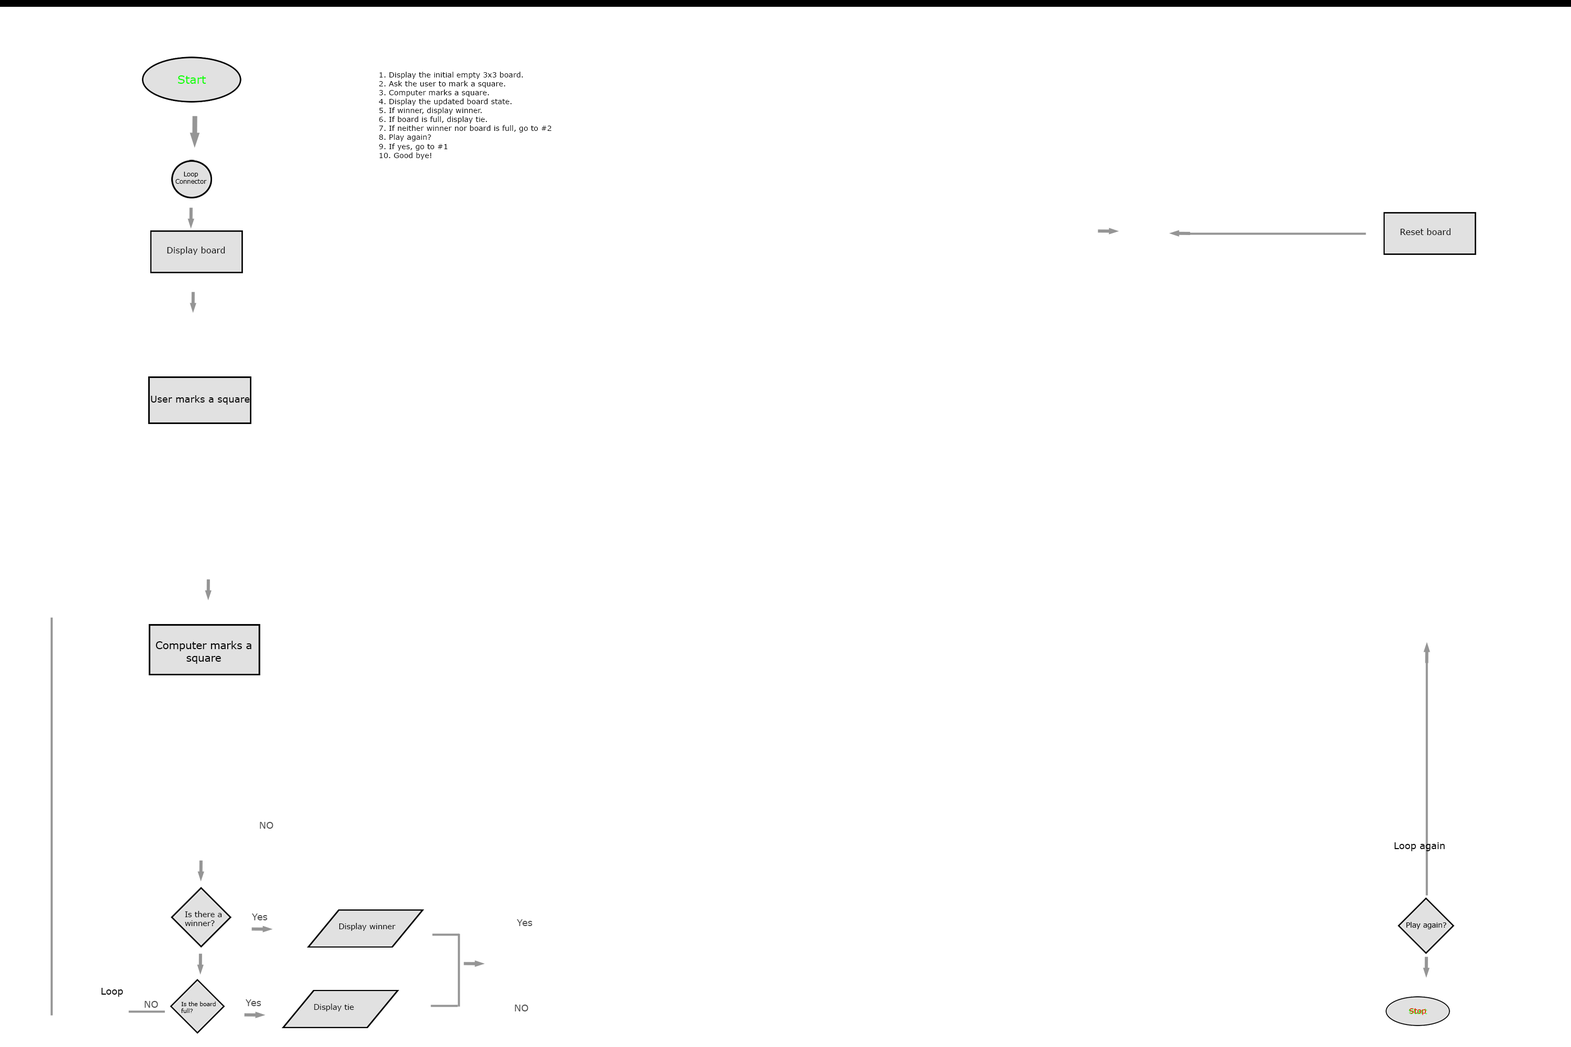
<style>
.page{position:relative;width:1571px;height:1047px;background:#ffffff}
.page>*{position:absolute;margin:0}
.t1{font:11.5px "Verdana";color:#0cff00}
.t2{font:7.5px "Verdana";color:#000000}
.t3{font:6.1px "Verdana";color:#000000}
.t4{font:8.6px "Verdana";color:#000000}
.t5{font:9.5px "Verdana";color:#000000}
.t6{font:10.3px "Verdana";color:#000000}
.t7{font:9.4px "Verdana";color:#4d4d4d}
.t8{font:9.4px "Verdana";color:#000000}
.t9{font:7.7px "Verdana";color:#000000}
.t10{font:7.1px "Verdana";color:#000000}
.t11{font:5.7px "Verdana";color:#000000}
.t12{font:7.4px "Verdana"}
.t13{font:7.4px "Verdana";color:#ff0000}
</style>
<div class="page">
<p class="t1" style="left:178px;top:75px;width:28px;height:9px">Start</p>
<p class="t2" style="left:379px;top:72px;width:172px;height:88px">1. Display the initial empty 3x3 board.<br>2. Ask the user to mark a square.<br>3. Computer marks a square.<br>4. Display the updated board state.<br>5. If winner, display winner.<br>6. If board is full, display tie.<br>7. If neither winner nor board is full, go to #2<br>8. Play again?<br>9. If yes, go to #1<br>10. Good bye!</p>
<p class="t3" style="left:175px;top:172px;width:32px;height:12px;text-align:center">Loop<br>Connector</p>
<p class="t4" style="left:1400px;top:228px;width:51px;height:7px">Reset board</p>
<p class="t4" style="left:167px;top:247px;width:58px;height:8px">Display board</p>
<p class="t5" style="left:151px;top:395px;width:99px;height:10px">User marks a square</p>
<p class="t6" style="left:156px;top:641px;width:95px;height:23px;text-align:center">Computer marks a<br>square</p>
<p class="t7" style="left:260px;top:822px;width:13px;height:7px">NO</p>
<p class="t8" style="left:1395px;top:843px;width:50px;height:9px">Loop again</p>
<p class="t9" style="left:185px;top:911px;width:37px;height:15px">Is there a<br>winner?</p>
<p class="t7" style="left:252px;top:914px;width:16px;height:7px">Yes</p>
<p class="t9" style="left:339px;top:923px;width:57px;height:8px">Display winner</p>
<p class="t7" style="left:517px;top:920px;width:16px;height:6px">Yes</p>
<p class="t10" style="left:1406px;top:922px;width:41px;height:8px">Play again?</p>
<p class="t8" style="left:101px;top:988px;width:22px;height:9px">Loop</p>
<p class="t7" style="left:145px;top:1001px;width:13px;height:7px">NO</p>
<p class="t11" style="left:181px;top:1002px;width:35px;height:11px">Is the board<br>full?</p>
<p class="t7" style="left:246px;top:1000px;width:15px;height:7px">Yes</p>
<p class="t9" style="left:314px;top:1004px;width:40px;height:8px">Display tie</p>
<p class="t7" style="left:515px;top:1005px;width:13px;height:7px">NO</p>
<p class="t12" style="left:1409px;top:1009px;width:19px;height:5px">Start</p>
<p class="t13" style="left:1409px;top:1009px;width:18px;height:7px">Stop</p>
</div>
